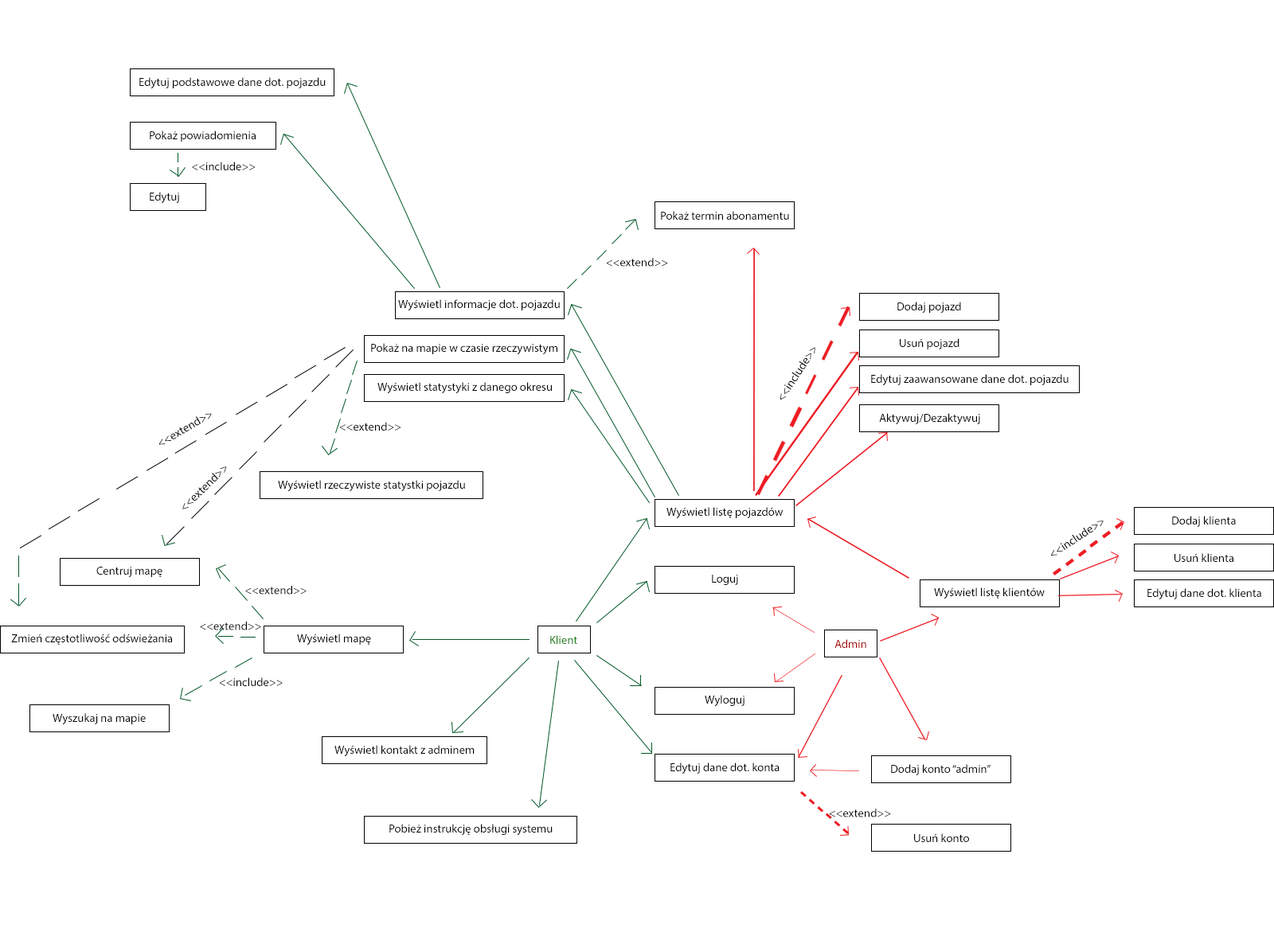
<style>
.page{position:relative;width:1274px;height:936px;background:#ffffff}
.page>*{position:absolute;margin:0}
.t1{font:11.7px "MyriadPro-Regular";color:#000000}
.t2{font:11.7px "MyriadPro-Regular";color:#107e0e}
.t3{font:11.7px "MyriadPro-Regular";color:#a50000}
</style>
<div class="page">
<p class="t1" style="left:139px;top:77px;width:187px;height:12px">Edytuj podstawowe dane dot. pojazdu</p>
<p class="t1" style="left:150px;top:131px;width:106px;height:11px">Pokaż powiadomienia</p>
<p class="t1" style="left:192px;top:162px;width:63px;height:8px">&lt;&lt;include&gt;&gt;</p>
<p class="t1" style="left:150px;top:192px;width:29px;height:12px">Edytuj</p>
<p class="t1" style="left:661px;top:211px;width:128px;height:9px">Pokaż termin abonamentu</p>
<p class="t1" style="left:607px;top:258px;width:60px;height:9px">&lt;&lt;extend&gt;&gt;</p>
<p class="t1" style="left:398px;top:299px;width:162px;height:12px">Wyświetl informacje dot. pojazdu</p>
<p class="t1" style="left:897px;top:302px;width:64px;height:11px">Dodaj pojazd</p>
<p class="t1" style="left:900px;top:338px;width:59px;height:11px">Usuń pojazd</p>
<p class="t1" style="left:371px;top:343px;width:186px;height:12px">Pokaż na mapie w czasie rzeczywistym</p>
<p class="t1" style="left:780px;top:347px;width:35px;height:53px;rotate:-57deg">&lt;&lt;include&gt;&gt;</p>
<p class="t1" style="left:871px;top:374px;width:197px;height:12px">Edytuj zaawansowane dane dot. pojazdu</p>
<p class="t1" style="left:377px;top:382px;width:175px;height:12px">Wyświetl statystyki z danego okresu</p>
<p class="t1" style="left:158px;top:413px;width:54px;height:32px;rotate:-30deg">&lt;&lt;extend&gt;&gt;</p>
<p class="t1" style="left:879px;top:413px;width:101px;height:12px">Aktywuj/Dezaktywuj</p>
<p class="t1" style="left:340px;top:422px;width:60px;height:9px">&lt;&lt;extend&gt;&gt;</p>
<p class="t1" style="left:182px;top:466px;width:45px;height:43px;rotate:-44deg">&lt;&lt;extend&gt;&gt;</p>
<p class="t1" style="left:278px;top:480px;width:187px;height:12px">Wyświetl rzeczywiste statystki pojazdu</p>
<p class="t1" style="left:666px;top:507px;width:117px;height:12px">Wyświetl listę pojazdów</p>
<p class="t1" style="left:1051px;top:521px;width:52px;height:35px;rotate:-33deg">&lt;&lt;include&gt;&gt;</p>
<p class="t1" style="left:1172px;top:516px;width:64px;height:11px">Dodaj klienta</p>
<p class="t1" style="left:1174px;top:553px;width:59px;height:9px">Usuń klienta</p>
<p class="t1" style="left:96px;top:567px;width:66px;height:10px">Centruj mapę</p>
<p class="t1" style="left:712px;top:575px;width:26px;height:10px">Loguj</p>
<p class="t1" style="left:245px;top:586px;width:61px;height:9px">&lt;&lt;extend&gt;&gt;</p>
<p class="t1" style="left:934px;top:588px;width:110px;height:11px">Wyświetl listę klientów</p>
<p class="t1" style="left:1147px;top:588px;width:114px;height:12px">Edytuj dane dot. klienta</p>
<p class="t1" style="left:200px;top:622px;width:61px;height:8px">&lt;&lt;extend&gt;&gt;</p>
<p class="t1" style="left:11px;top:634px;width:161px;height:11px">Zmień częstotliwość odświeżania</p>
<p class="t1" style="left:297px;top:634px;width:74px;height:12px">Wyświetl mapę</p>
<p class="t2" style="left:550px;top:635px;width:27px;height:9px">Klient</p>
<p class="t3" style="left:834px;top:639px;width:32px;height:9px">Admin</p>
<p class="t1" style="left:220px;top:677px;width:63px;height:9px">&lt;&lt;include&gt;&gt;</p>
<p class="t1" style="left:705px;top:695px;width:39px;height:12px">Wyloguj</p>
<p class="t1" style="left:53px;top:713px;width:93px;height:12px">Wyszukaj na mapie</p>
<p class="t1" style="left:334px;top:745px;width:140px;height:12px">Wyświetl kontakt z adminem</p>
<p class="t1" style="left:670px;top:763px;width:109px;height:12px">Edytuj dane dot. konta</p>
<p class="t1" style="left:891px;top:764px;width:99px;height:11px">Dodaj konto “admin”</p>
<p class="t1" style="left:830px;top:809px;width:60px;height:9px">&lt;&lt;extend&gt;&gt;</p>
<p class="t1" style="left:389px;top:824px;width:163px;height:12px">Pobież instrukcję obsługi systemu</p>
<p class="t1" style="left:914px;top:833px;width:55px;height:9px">Usuń konto</p>
</div>
